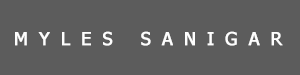
<style>
.page{position:relative;width:300px;height:75px;background:#5c5c5c}
.page>*{position:absolute;margin:0}
.t1{font:18px "Tahoma";letter-spacing:0.6em;color:#fefefe;font-weight:bold}
</style>
<div class="page">
<p class="t1" style="left:15px;top:31px;width:268px;height:15px">MYLES SANIGAR</p>
</div>
